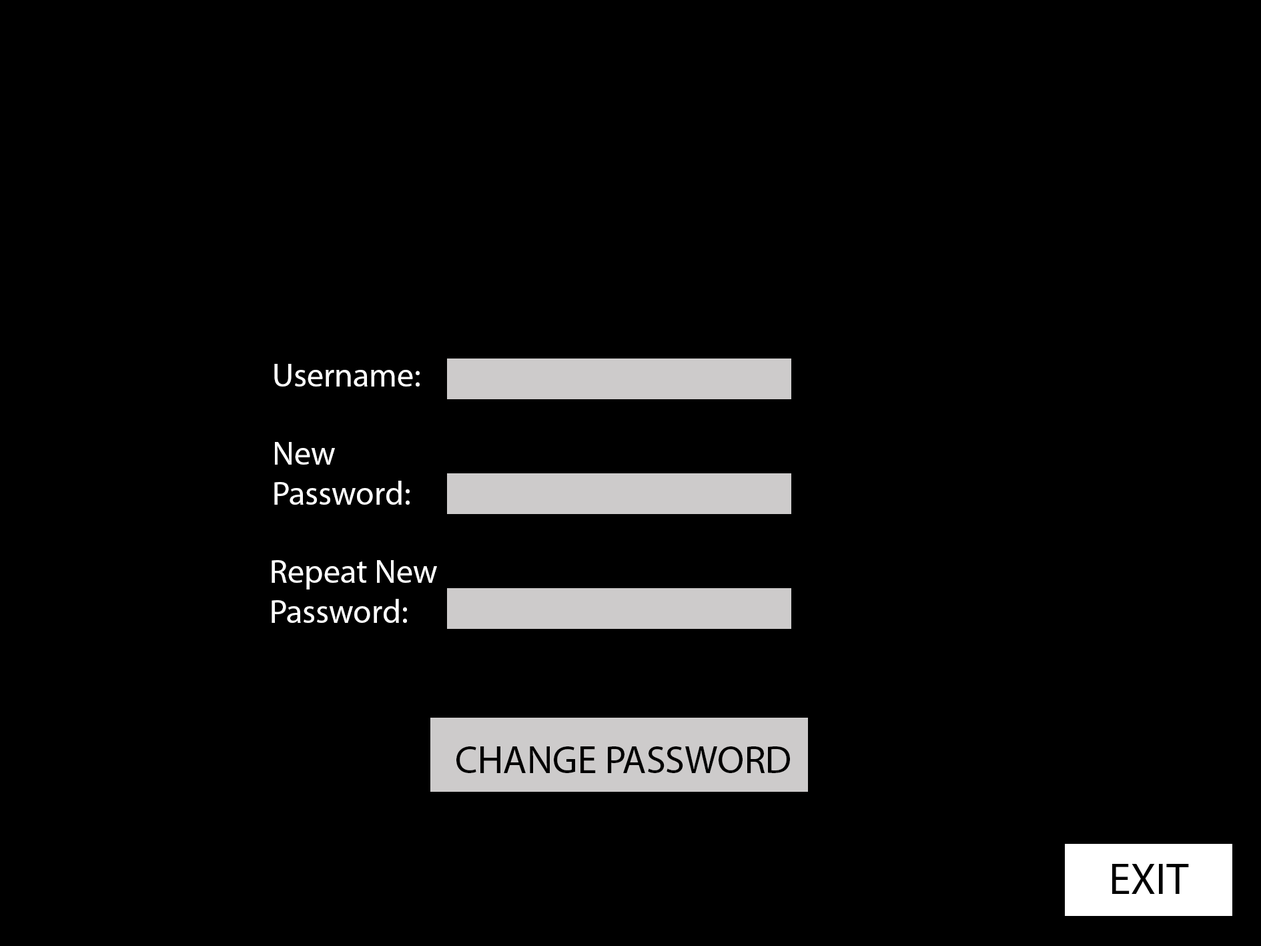
<style>
.page{position:relative;width:1261px;height:946px;background:#000000}
.page>*{position:absolute;margin:0}
.t1{font:33.4px "MyriadPro-Regular";color:#ffffff}
.t2{font:38.9px "MyriadPro-Regular";color:#000000}
.t3{font:44.5px "MyriadPro-Regular";color:#000000}
</style>
<div class="page">
<p class="t1" style="left:274px;top:364px;width:146px;height:22px">Username:</p>
<p class="t1" style="left:274px;top:442px;width:136px;height:62px">New <br>Password:</p>
<p class="t1" style="left:272px;top:560px;width:165px;height:63px">Repeat New<br>Password:</p>
<p class="t2" style="left:456px;top:746px;width:334px;height:27px">CHANGE PASSWORD</p>
<p class="t3" style="left:1112px;top:863px;width:77px;height:30px">EXIT</p>
</div>
